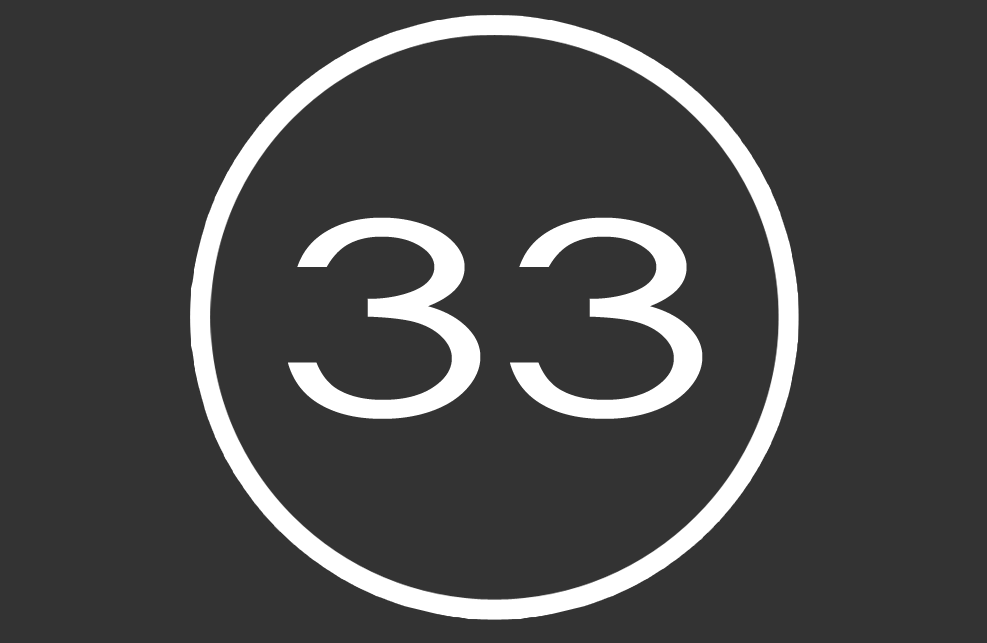
<style>
.page{position:relative;width:987px;height:643px;background:#333333}
.page>*{position:absolute;margin:0}
.t1{font:266.7px "CenturyGothic";color:#ffffff;scale:1.5 1}
</style>
<div class="page">
<p class="t1" style="left:288px;top:217px;width:415px;height:202px">33</p>
</div>
